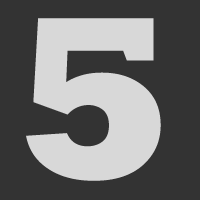
<style>
.page{position:relative;width:200px;height:200px;background:#333333}
.page>*{position:absolute;margin:0}
.t1{font:236.9px "Rockwell-ExtraBold";color:#d8d8d8}
</style>
<div class="page">
<p class="t1" style="left:26px;top:18px;width:135px;height:163px">5</p>
</div>
